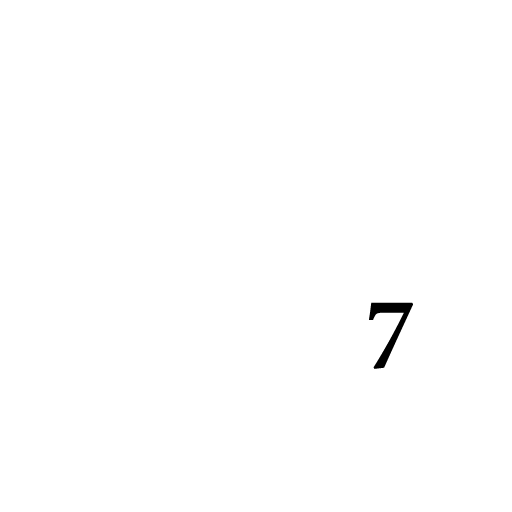
<style>
.page{position:relative;width:512px;height:512px;background:#ffffff}
.page>*{position:absolute;margin:0}
.t1{font:112px "AdobeGurmukhi-Bold";color:#000000}
</style>
<div class="page">
<p class="t1" style="left:369px;top:302px;width:44px;height:67px">7</p>
</div>
